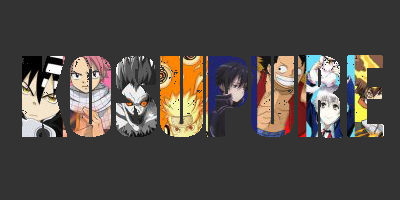
<style>
.page{position:relative;width:400px;height:200px;background:#333333}
.page>*{position:absolute;margin:0}
.t1{font:80px "DeadKansas"}
</style>
<div class="page">
<p class="t1" style="left:22px;top:55px;width:362px;height:83px">KOSUPURE</p>
</div>
